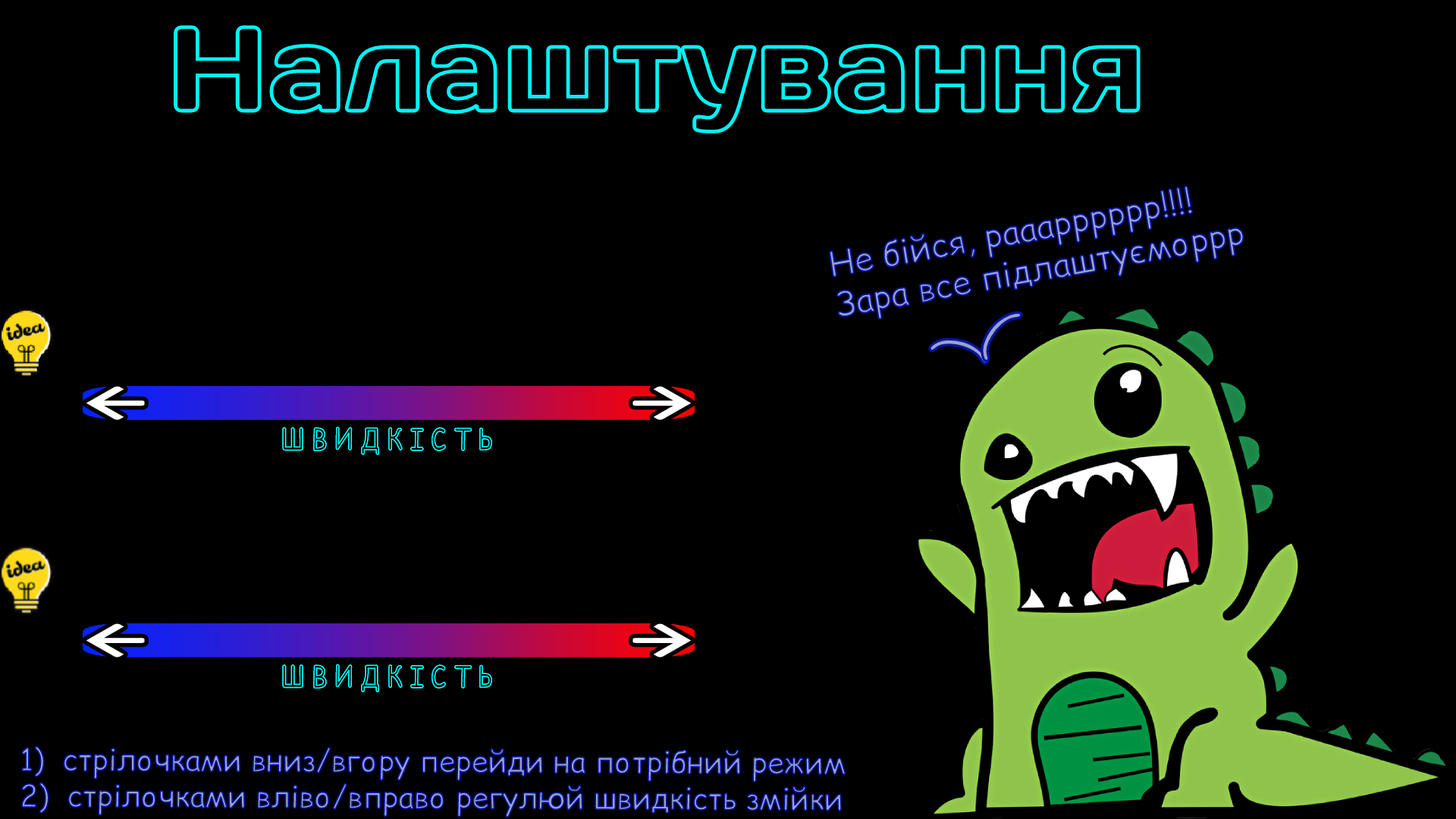
<style>
.page{position:relative;width:1456px;height:819px;background:#000000}
.page>*{position:absolute;margin:0}
.t1{font:119.2px "DaysOne-Regular";color:#000000}
.t2{font:34px "ComicRelief"}
.t3{font:59.7px "ComicRelief"}
.t4{font:29.1px "ComicRelief";scale:0.85 1}
.t5{font:30.2px "ComicRelief"}
</style>
<div class="page">
<p class="t1" style="left:172px;top:24px;width:970px;height:111px">Налаштування</p>
<p class="t2" style="left:827px;top:184px;width:419px;height:137px;rotate:-10deg">Не бійся, рааарррррр!!!!<br>Зара все підлаштуєморрр</p>
<p class="t3" style="left:981px;top:311px;width:42px;height:51px;rotate:37deg">(</p>
<p class="t3" style="left:928px;top:337px;width:61px;height:28px;rotate:103deg">(</p>
<p class="t4" style="left:282px;top:426px;width:210px;height:29px">Ш В И Д К І С Т Ь</p>
<p class="t4" style="left:282px;top:426px;width:210px;height:29px">Ш В И Д К І С Т Ь</p>
<p class="t4" style="left:282px;top:664px;width:210px;height:28px">Ш В И Д К І С Т Ь</p>
<p class="t4" style="left:282px;top:664px;width:210px;height:28px">Ш В И Д К І С Т Ь</p>
<p class="t5" style="left:20px;top:744px;width:827px;height:75px">1)  стрілочками вниз/вгору перейди на потрібний режим<br>2)  стрілочками вліво/вправо регулюй швидкість змійки</p>
</div>
